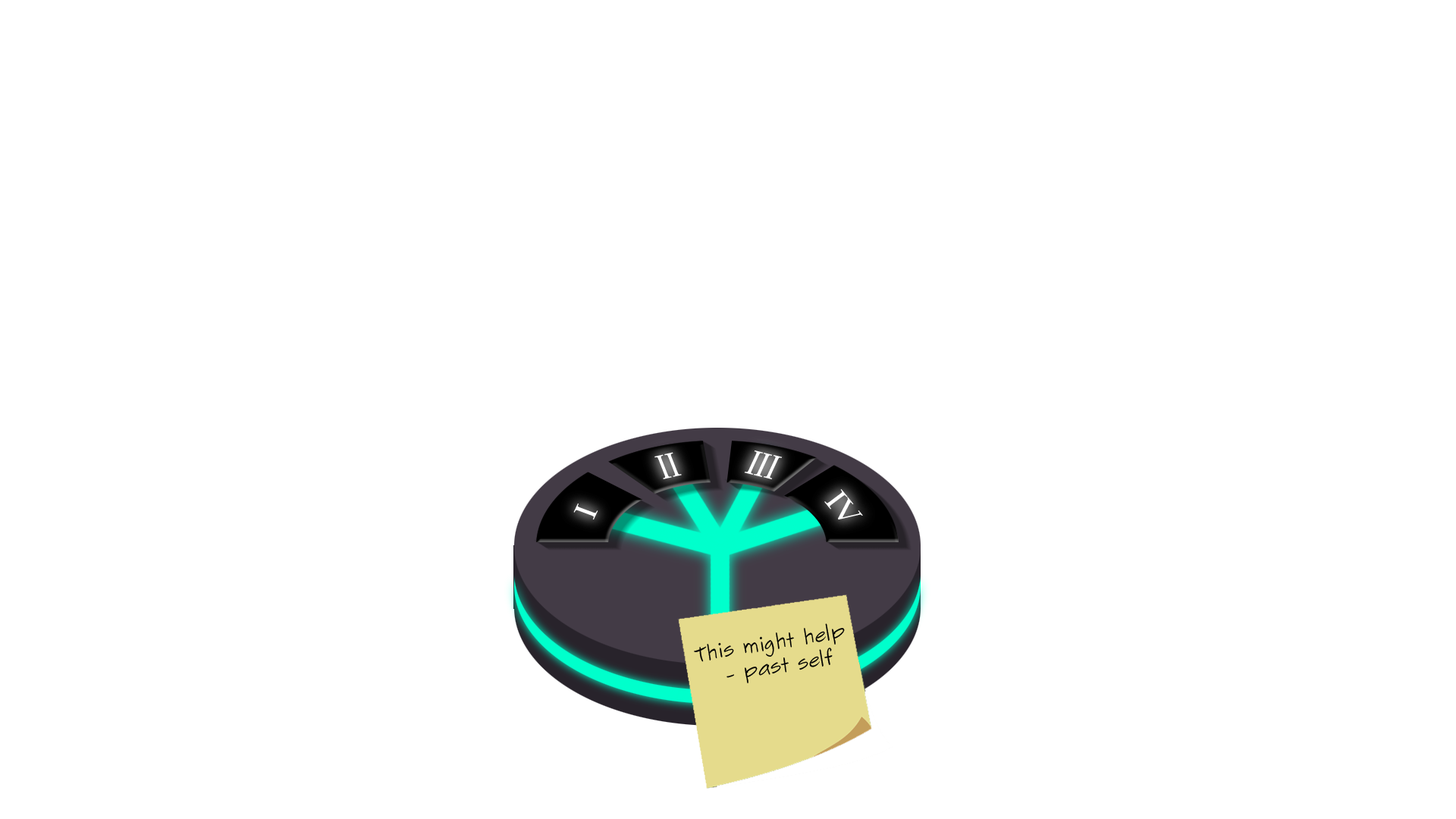
<style>
.page{position:relative;width:1456px;height:819px;background:#ffffff}
.page>*{position:absolute;margin:0}
.t1{font:20.1px "SketchFlowPrint";color:#000000}
</style>
<div class="page">
<p class="t1" style="left:694px;top:623px;width:151px;height:60px;rotate:-9deg">This might help<br>   - past self</p>
</div>
